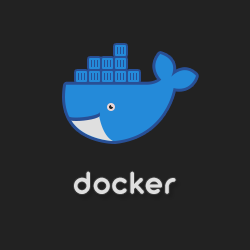
<style>
.page{position:relative;width:250px;height:250px;background:#222222}
.page>*{position:absolute;margin:0}
.t1{font:34px "AristotelicaDisplayTrial-DemiBo";letter-spacing:0.025em;color:#f5f5f5}
</style>
<div class="page">
<p class="t1" style="left:74px;top:171px;width:102px;height:23px">docker</p>
</div>
